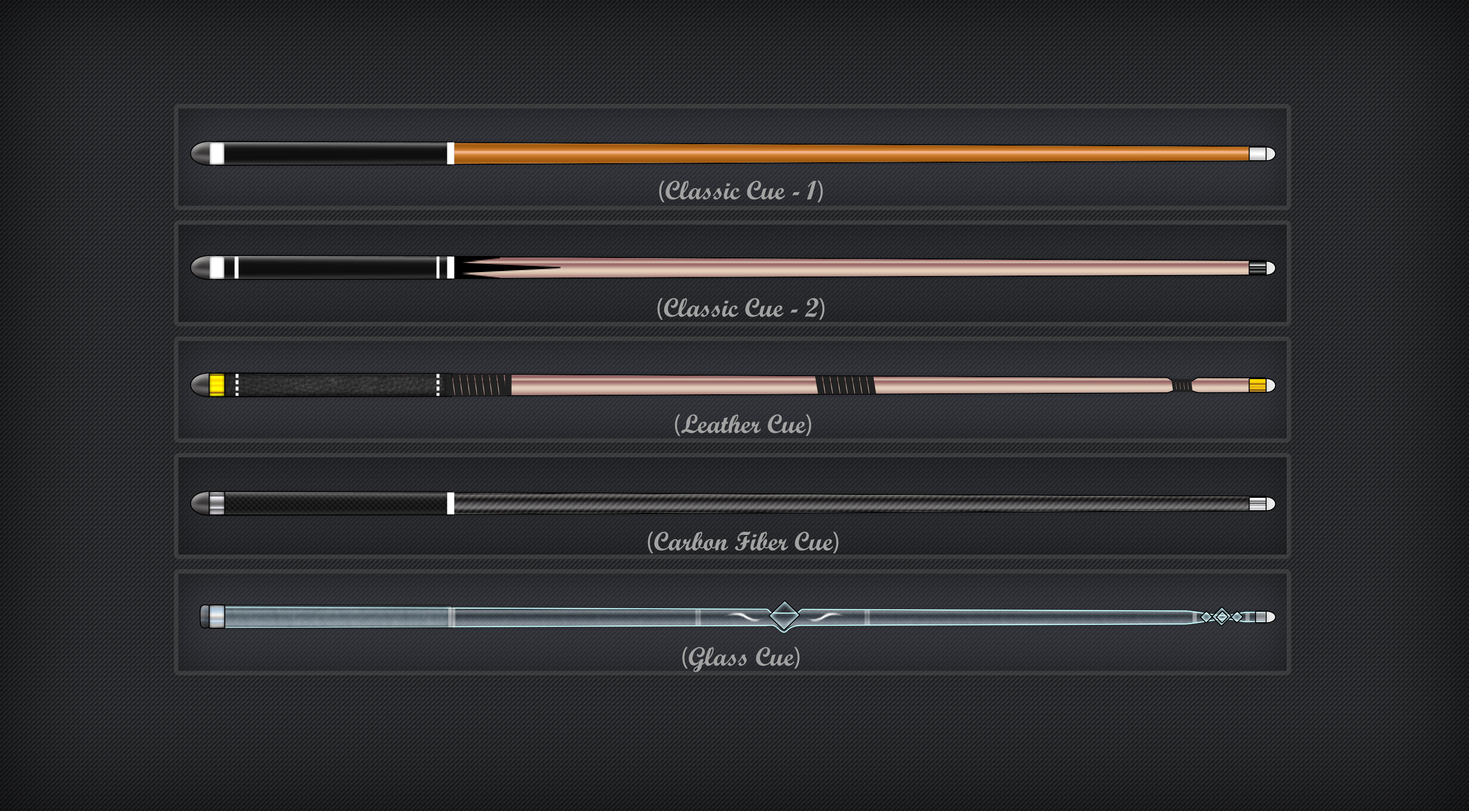
<style>
.page{position:relative;width:1469px;height:811px}
.page>*{position:absolute;margin:0}
.t1{font:26.4px "ScriptMTBold";color:#a2a2a2}
.t2{font:26.4px "MyriadPro-Regular";color:#a2a2a2}
</style>
<div class="page">
<p class="t1" style="left:659px;top:181px;width:164px;height:21px"><span class="t2">(</span>Classic Cue - 1<span class="t2">)</span></p>
<p class="t1" style="left:657px;top:298px;width:168px;height:22px"><span class="t2">(</span>Classic Cue - 2<span class="t2">)</span></p>
<p class="t1" style="left:675px;top:415px;width:136px;height:22px"><span class="t2">(</span>Leather Cue<span class="t2">)</span></p>
<p class="t1" style="left:648px;top:531px;width:191px;height:23px"><span class="t2">(</span>Carbon Fiber Cue<span class="t2">)</span></p>
<p class="t1" style="left:682px;top:647px;width:118px;height:26px"><span class="t2">(</span>Glass Cue<span class="t2">)</span></p>
</div>
